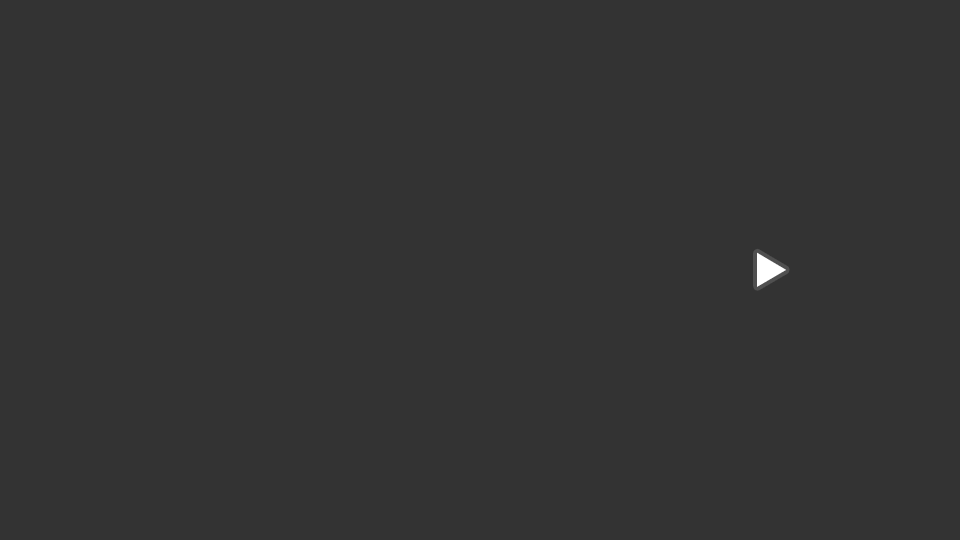
<style>
.page{position:relative;width:960px;height:540px;background:#333333}
.page>*{position:absolute;margin:0}
.t1{font:48px "SeoulNamsanB";letter-spacing:-0.005em;color:#ffffff}
</style>
<div class="page">
<p class="t1" style="left:757px;top:252px;width:29px;height:35px;rotate:180deg">◀</p>
</div>
